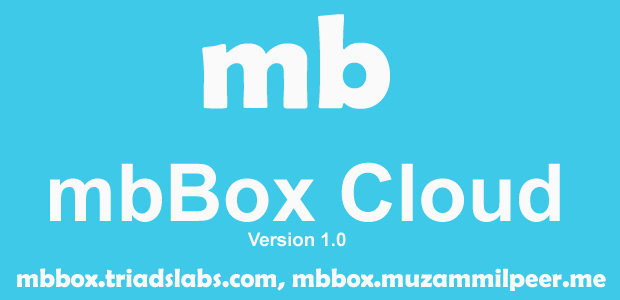
<style>
.page{position:relative;width:620px;height:300px;background:#3dc9e7}
.page>*{position:absolute;margin:0}
.t1{font:133.3px "BerlinSansFBDemi-Bold";color:#fbfafa}
.t2{font:80px "Arial-BoldMT";color:#fbfafa}
.t3{font:18.7px "Arial-BoldMT";color:#fbfafa}
.t4{font:26.7px "BerlinSansFBDemi-Bold";color:#fbfafa}
</style>
<div class="page">
<p class="t1" style="left:202px;top:14px;width:188px;height:95px">mb</p>
<p class="t2" style="left:50px;top:162px;width:510px;height:60px">mbBox Cloud</p>
<p class="t3" style="left:247px;top:232px;width:99px;height:15px">Version 1.0</p>
<p class="t4" style="left:17px;top:268px;width:589px;height:23px">mbbox.triadslabs.com, mbbox.muzammilpeer.me</p>
</div>
